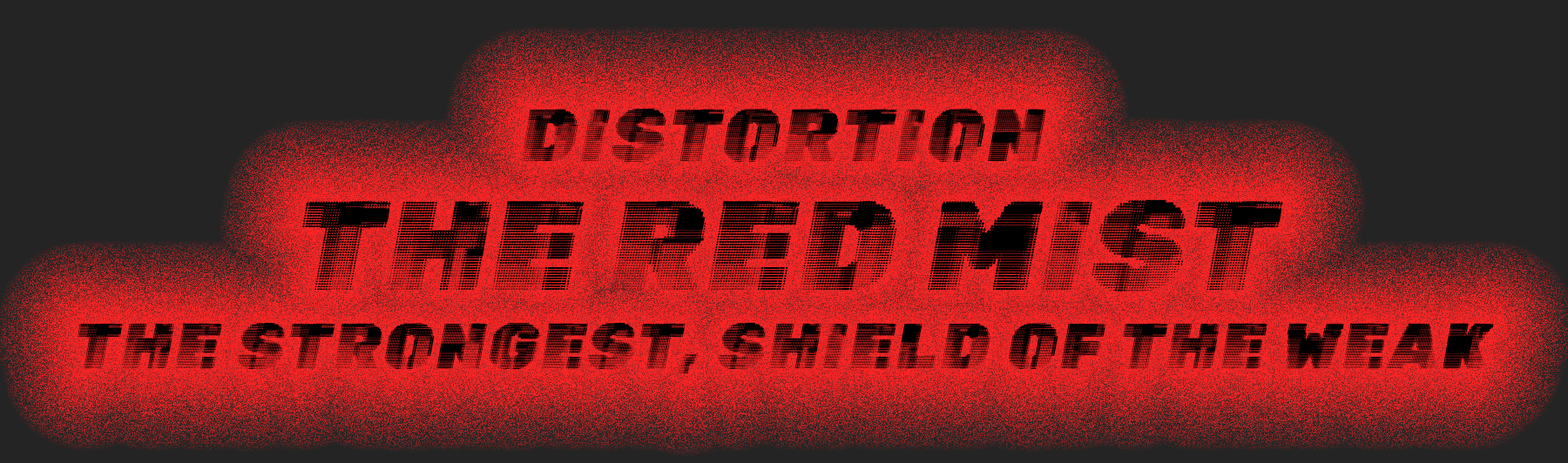
<style>
.page{position:relative;width:1568px;height:463px;background:#242424}
.page>*{position:absolute;margin:0}
.t1{font:130.7px "Rubik80sFade-Regular";color:#000000;text-transform:uppercase;font-weight:bold;font-style:italic}
.t2{font:113.2px "Rubik80sFade-Regular";color:#000000;text-transform:uppercase;font-weight:bold;font-style:italic}
</style>
<div class="page">
<p class="t1" style="left:521px;top:108px;width:525px;height:54px">Distortion</p>
<p class="t1" style="left:301px;top:199px;width:982px;height:93px">The Red Mist</p>
<p class="t2" style="left:78px;top:323px;width:1416px;height:51px">THE STRONGEST, SHIELD of the weak</p>
</div>
